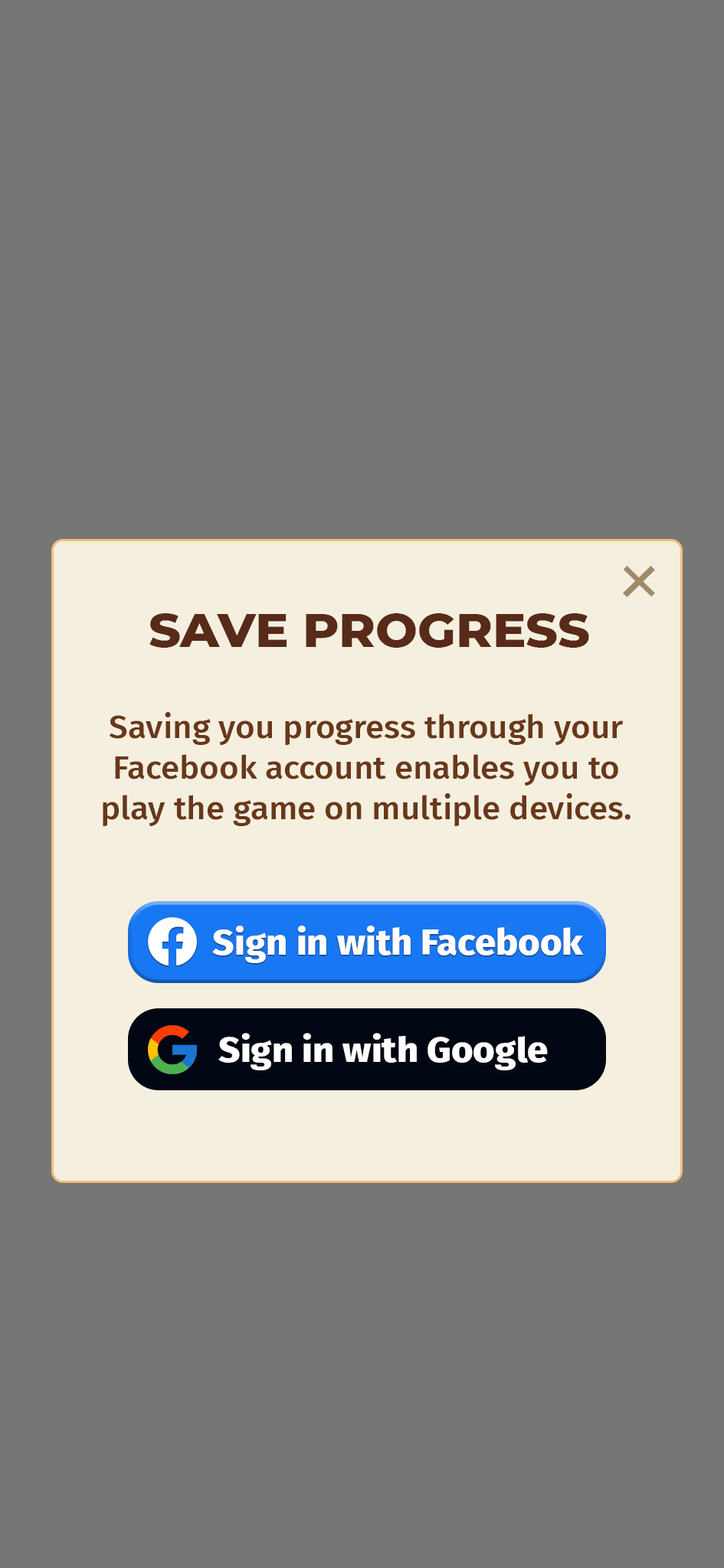
<style>
.page{position:relative;width:724px;height:1568px;background:#767676}
.page>*{position:absolute;margin:0}
.t1{font:47.1px "Montserrat-ExtraBold";color:#582a19;scale:1.05 1}
.t2{font:32px "FiraSans-Medium";color:#68381a;scale:1.05 1}
.t3{font:35.6px "FiraSans-ExtraBold";color:#ffffff;scale:1.05 1}
</style>
<div class="page">
<p class="t1" style="left:149px;top:613px;width:440px;height:35px">SAVE PROGRESS</p>
<p class="t2" style="left:103px;top:712px;width:527px;height:114px;text-align:center">Saving you progress through your<br>Facebook account enables you to<br>play the game on multiple devices.</p>
<p class="t3" style="left:212px;top:926px;width:371px;height:37px">Sign in with Facebook</p>
<p class="t3" style="left:218px;top:1033px;width:329px;height:37px">Sign in with Google</p>
</div>
